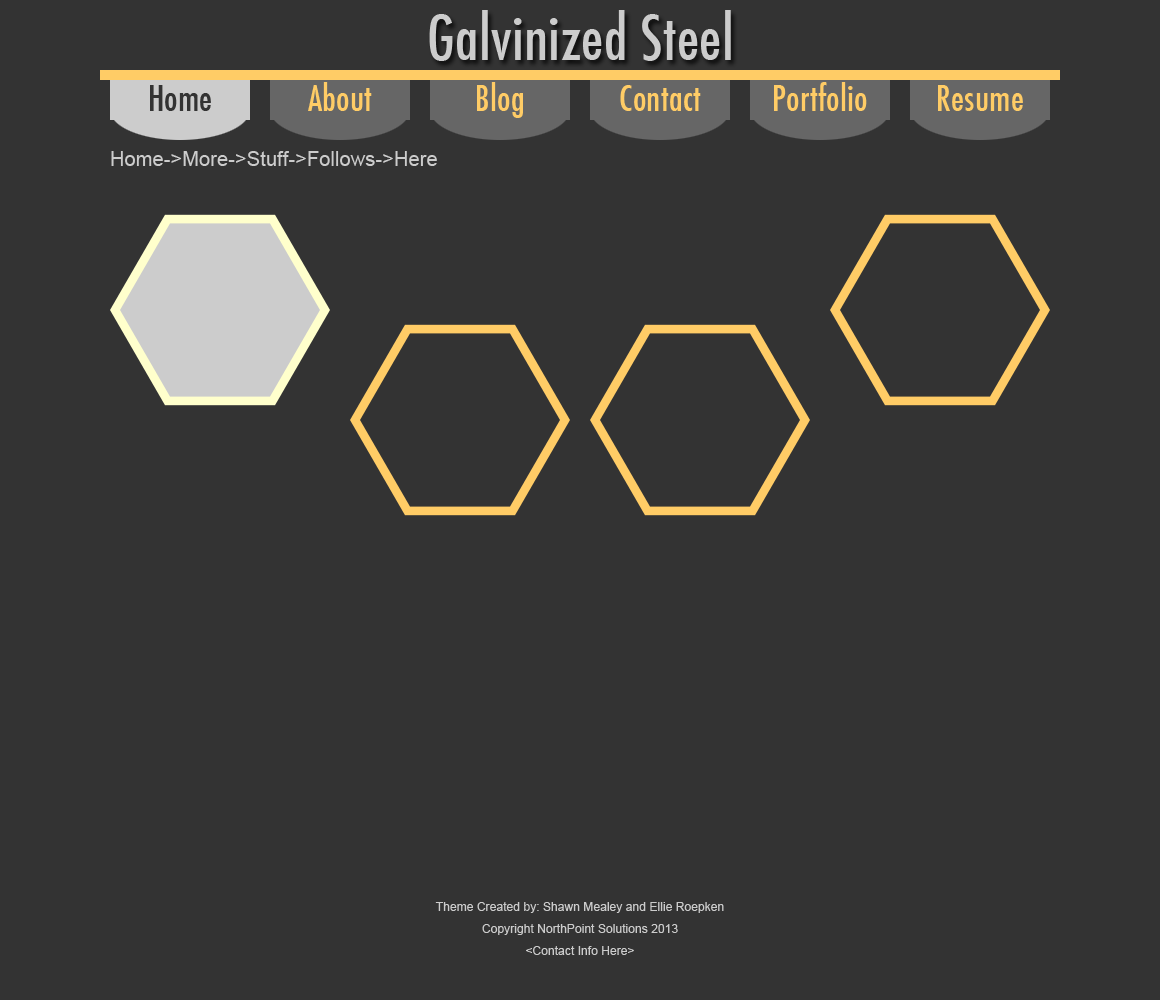
<style>
.page{position:relative;width:1160px;height:1000px;background:#333333}
.page>*{position:absolute;margin:0}
.t1{font:60px "Futura-CondensedMedium";letter-spacing:0.005em;color:#cccccc}
.t2{font:35px "Futura-CondensedMedium";letter-spacing:0.005em;color:#333333}
.t3{font:35px "Futura-CondensedMedium";letter-spacing:0.005em;color:#ffcc66}
.t4{font:20px "ArialMT";letter-spacing:0.005em;color:#cccccc}
.t5{font:12px/22px "ArialMT";letter-spacing:0.005em;color:#cccccc}
</style>
<div class="page">
<p class="t1" style="left:429px;top:10px;width:302px;height:51px">Galvinized Steel</p>
<p class="t2" style="left:150px;top:85px;width:61px;height:26px">Home</p>
<p class="t3" style="left:308px;top:82px;width:64px;height:29px">About</p>
<p class="t3" style="left:477px;top:82px;width:46px;height:36px">Blog</p>
<p class="t3" style="left:620px;top:85px;width:81px;height:26px">Contact</p>
<p class="t3" style="left:774px;top:82px;width:93px;height:29px">Portfolio</p>
<p class="t3" style="left:938px;top:85px;width:85px;height:26px">Resume</p>
<p class="t4" style="left:111px;top:151px;width:326px;height:15px">Home-&gt;More-&gt;Stuff-&gt;Follows-&gt;Here</p>
<p class="t5" style="left:435px;top:902px;width:289px;height:53px;text-align:center">Theme Created by: Shawn Mealey and Ellie Roepken<br>Copyright NorthPoint Solutions 2013<br>&lt;Contact Info Here&gt;</p>
</div>
